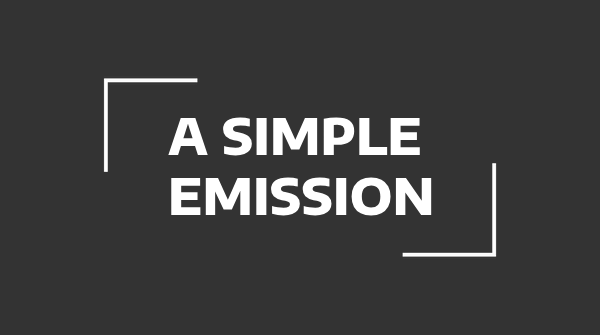
<style>
.page{position:relative;width:600px;height:335px;background:#333333}
.page>*{position:absolute;margin:0}
.t1{font:50px "EncodeSansSemiExpanded-ExtraBold";color:#ffffff}
</style>
<div class="page">
<p class="t1" style="left:168px;top:117px;width:264px;height:99px">A SIMPLE <br>EMISSION</p>
</div>
